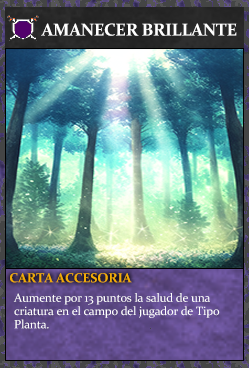
<style>
.page{position:relative;width:249px;height:368px}
.page>*{position:absolute;margin:0}
.t1{font:17.3px "Constantia-Bold";letter-spacing:-0.02em;color:#ffffff}
.t2{font:13.3px "Constantia-Bold";letter-spacing:-0.02em;color:#f2ac05}
.t3{font:12px/13.3px "Constantia";letter-spacing:-0.02em;color:#ffffff}
</style>
<div class="page">
<p class="t1" style="left:41px;top:23px;width:196px;height:13px">AMANECER BRILLANTE</p>
<p class="t2" style="left:10px;top:273px;width:122px;height:10px">CARTA ACCESORIA</p>
<p class="t3" style="left:13px;top:293px;width:207px;height:36px">Aumente por 13 puntos la salud de una<br>criatura en el campo del jugador de Tipo<br>Planta.</p>
</div>
